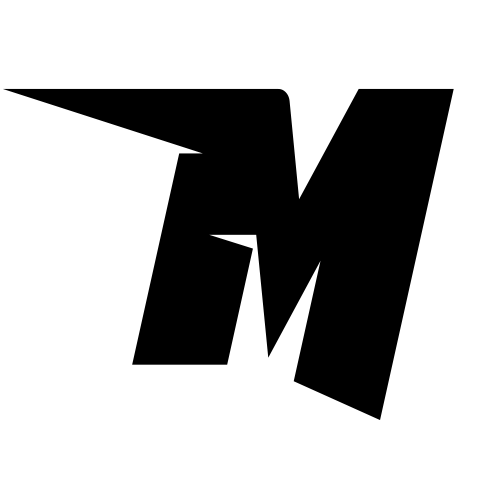
<style>
.page{position:relative;width:500px;height:500px;background:#ffffff}
.page>*{position:absolute;margin:0}
.t1{font:337.7px "MaskedHeroDemo";color:#000000;scale:0.83 1}
</style>
<div class="page">
<p class="t1" style="left:3px;top:88px;width:451px;height:332px">M</p>
</div>
